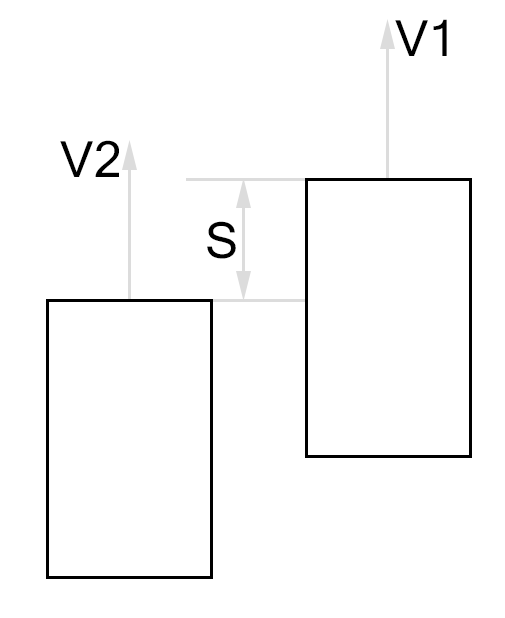
<style>
.page{position:relative;width:505px;height:618px;background:#ffffff}
.page>*{position:absolute;margin:0}
.t1{font:50px "MicrosoftSansSerif";color:#000000}
</style>
<div class="page">
<p class="t1" style="left:395px;top:19px;width:52px;height:37px">V1</p>
<p class="t1" style="left:60px;top:140px;width:59px;height:37px">V2</p>
<p class="t1" style="left:207px;top:221px;width:29px;height:38px">S</p>
</div>
